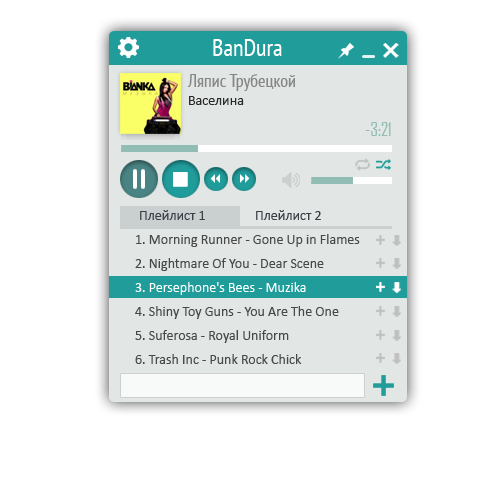
<style>
.page{position:relative;width:500px;height:500px;background:#ffffff}
.page>*{position:absolute;margin:0}
.t1{font:24px "PTSans-Narrow";color:#ffffff}
.t2{font:18px "PTSans-Narrow";color:#878787}
.t3{font:14px "Calibri";color:#2a2a2a}
.t4{font:18px "AgencyFB-Reg";color:#91bdb4;text-transform:uppercase}
.t5{font:14px "Calibri";color:#3a4046}
.t6{font:14px/24px "Calibri";color:#484848}
.t7{font:14px/24px "Calibri";color:#ffffff}
</style>
<div class="page">
<p class="t1" style="left:213px;top:39px;width:69px;height:17px">BanDura</p>
<p class="t2" style="left:187px;top:74px;width:108px;height:17px">Ляпис Трубецкой</p>
<p class="t3" style="left:189px;top:96px;width:55px;height:9px">Васелина</p>
<p class="t4" style="left:365px;top:122px;width:26px;height:14px">-3:21</p>
<p class="t5" style="left:140px;top:210px;width:65px;height:10px">Плейлист 1</p>
<p class="t5" style="left:256px;top:210px;width:65px;height:10px">Плейлист 2</p>
<p class="t6" style="left:135px;top:234px;width:225px;height:130px">1. Morning Runner - Gone Up in Flames<br>2. Nightmare Of You - Dear Scene<br><span class="t7">3. Persephone's Bees - Muzika<br></span>4. Shiny Toy Guns - You Are The One<br>5. Suferosa - Royal Uniform<br>6. Trash Inc - Punk Rock Chick</p>
</div>
